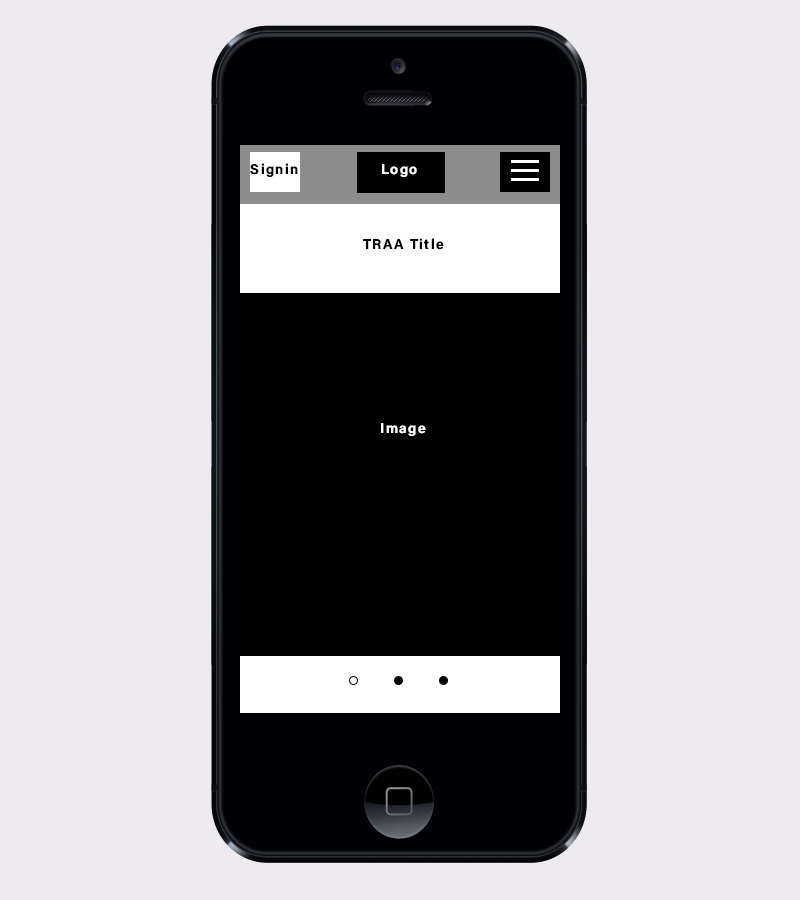
<style>
.page{position:relative;width:800px;height:900px;background:#eeebf0}
.page>*{position:absolute;margin:0}
.t1{font:14px "AcuminConcept-Semibold";letter-spacing:0.1em;color:#000000}
.t2{font:14px "AcuminConcept-Semibold";letter-spacing:0.1em;color:#ffffff}
</style>
<div class="page">
<p class="t1" style="left:250px;top:163px;width:48px;height:14px">Signin</p>
<p class="t2" style="left:382px;top:164px;width:35px;height:13px">Logo</p>
<p class="t1" style="left:363px;top:238px;width:81px;height:12px">TRAA Title</p>
<p class="t2" style="left:381px;top:423px;width:45px;height:13px">Image</p>
</div>
